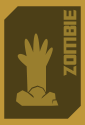
<style>
.page{position:relative;width:85px;height:125px;background:#4c3f17}
.page>*{position:absolute;margin:0}
.t1{font:20px "TransformersMovie";letter-spacing:0.04em;color:#997e2e}
</style>
<div class="page">
<p class="t1" style="left:63px;top:9px;width:14px;height:67px;rotate:-90deg">zombie</p>
</div>
